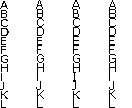
<style>
.page{position:relative;width:132px;height:108px;background:#ffffff}
.page>*{position:absolute;margin:0}
.t1{font:12px/9px "Lato-Regular";color:#000000}
.t2{font:12px/9px "ArialMT";color:#000000}
.t3{font:12px/9px "Verdana";color:#000000}
.t4{font:12px/9px "Small Fonts";color:#000000}
</style>
<div class="page">
<p class="t1" style="left:0px;top:0px;width:116px;height:108px">A <span class="t2">A </span><span class="t3">A </span><span class="t4">A<br></span>B <span class="t2">B </span><span class="t3">B </span><span class="t4">B<br></span>C <span class="t2">C </span><span class="t3">C </span><span class="t4">C<br></span>D <span class="t2">D </span><span class="t3">D </span><span class="t4">D<br></span>E E <span class="t3">E </span><span class="t4">E<br></span>F <span class="t2">F </span><span class="t3">F </span><span class="t4">F<br></span>G <span class="t2">G </span><span class="t3">G </span><span class="t4">G<br></span>H <span class="t2">H </span><span class="t3">H </span><span class="t4">H<br></span>I <span class="t2">I </span><span class="t3">I </span><span class="t4">I<br></span>J <span class="t2">J </span><span class="t3">J </span><span class="t4">J<br></span>K <span class="t2">K</span> K <span class="t4">K<br></span>L <span class="t2">L </span><span class="t3">L </span><span class="t4">L</span></p>
</div>
